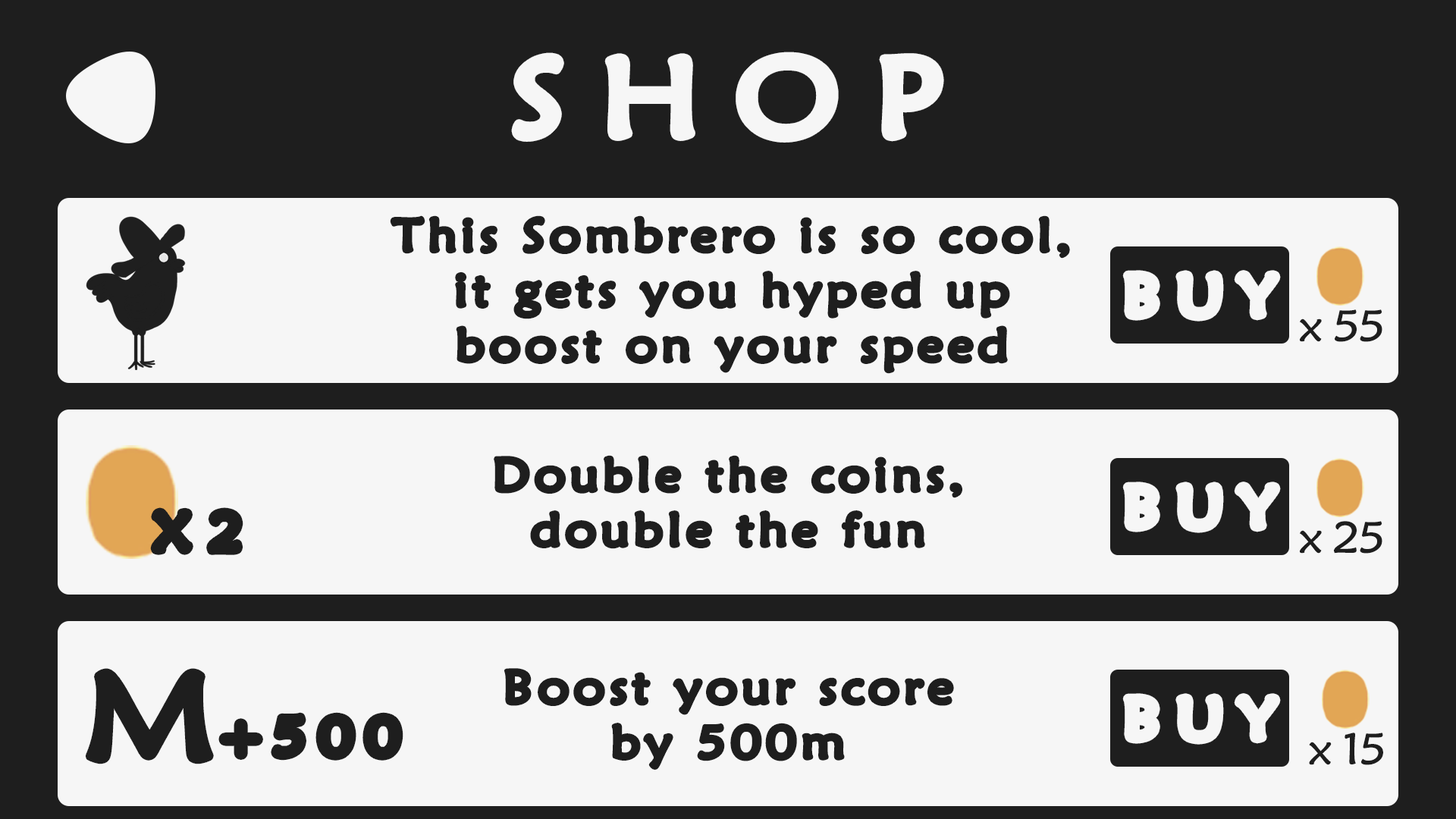
<style>
.page{position:relative;width:1456px;height:819px;background:#f6f6f6}
.page>*{position:absolute;margin:0}
.t1{font:110.1px "MaiandraGD-Regular";letter-spacing:0.28em;color:#f6f6f6;font-weight:bold;scale:1.11 1}
.t2{font:45.5px/54.9px "MaiandraGD-Regular";letter-spacing:0.08em;color:#1e1e1e;font-weight:bold;scale:1.11 1}
.t3{font:56.9px "MaiandraGD-Regular";letter-spacing:0.22em;color:#f6f6f6;font-weight:bold;scale:1.11 1}
.t4{font:44.3px "MaiandraGD-Regular";letter-spacing:-0.08em;color:#1e1e1e;font-weight:bold;scale:1.11 1}
.t5{font:53.1px "MaiandraGD-Regular";letter-spacing:0.28em;color:#1e1e1e;font-weight:bold;scale:1.11 1}
.t6{font:121.9px "MaiandraGD-Regular";letter-spacing:0.28em;color:#1e1e1e;font-weight:bold;scale:1.11 1}
.t7{font:53.1px "MaiandraGD-Regular";letter-spacing:0.18em;color:#1e1e1e;font-weight:bold;scale:1.11 1}
</style>
<div class="page">
<p class="t1" style="left:516px;top:56px;width:424px;height:82px">SHOP</p>
<p class="t2" style="left:392px;top:218px;width:676px;height:154px;text-align:center">This Sombrero is so cool,<br>it gets you hyped up<br>boost on your speed</p>
<p class="t3" style="left:1127px;top:275px;width:149px;height:42px">BUY</p>
<p class="t4" style="left:1300px;top:309px;width:82px;height:33px">x 55</p>
<p class="t2" style="left:496px;top:457px;width:464px;height:90px;text-align:center">Double the coins,<br>double the fun</p>
<p class="t3" style="left:1127px;top:486px;width:149px;height:43px">BUY</p>
<p class="t5" style="left:155px;top:512px;width:84px;height:39px">X2</p>
<p class="t4" style="left:1300px;top:521px;width:82px;height:33px">x 25</p>
<p class="t6" style="left:89px;top:673px;width:120px;height:87px">M</p>
<p class="t2" style="left:506px;top:670px;width:446px;height:97px;text-align:center">Boost your score<br>by 500m</p>
<p class="t3" style="left:1127px;top:698px;width:149px;height:42px">BUY</p>
<p class="t7" style="left:223px;top:717px;width:176px;height:39px">+500</p>
<p class="t4" style="left:1309px;top:733px;width:74px;height:32px">x 15</p>
</div>
